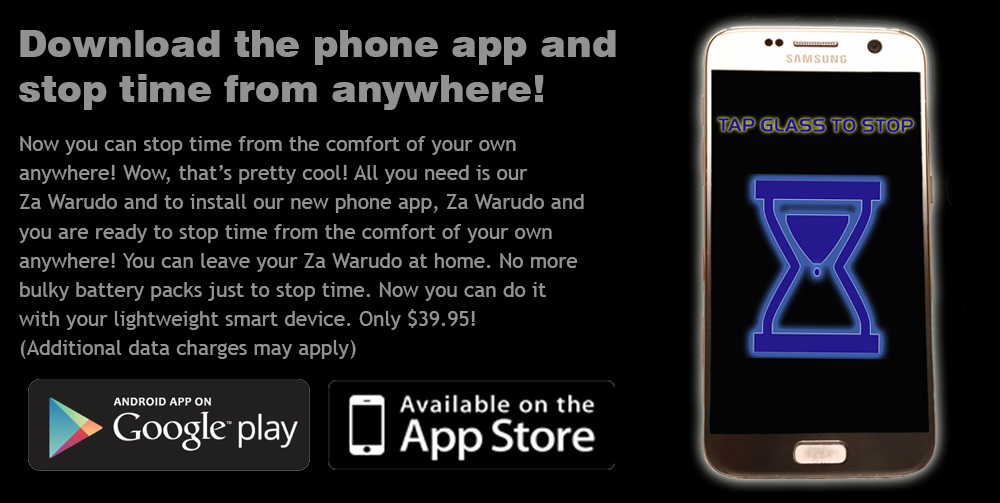
<style>
.page{position:relative;width:1000px;height:503px;background:#000000}
.page>*{position:absolute;margin:0}
.t1{font:37.5px "Swiss721BT-Black";color:#909293}
.t2{font:20.8px/29.2px "TrebuchetMS";color:#909293}
</style>
<div class="page">
<p class="t1" style="left:19px;top:30px;width:597px;height:80px">Download the phone app and<br>stop time from anywhere!</p>
<p class="t2" style="left:19px;top:136px;width:565px;height:223px">Now you can stop time from the comfort of your own <br>anywhere! Wow, that’s pretty cool! All you need is our <br>Za Warudo and to install our new phone app, Za Warudo and <br>you are ready to stop time from the comfort of your own <br>anywhere! You can leave your Za Warudo at home. No more<br>bulky battery packs just to stop time. Now you can do it <br>with your lightweight smart device. Only $39.95!<br>(Additional data charges may apply)</p>
</div>
